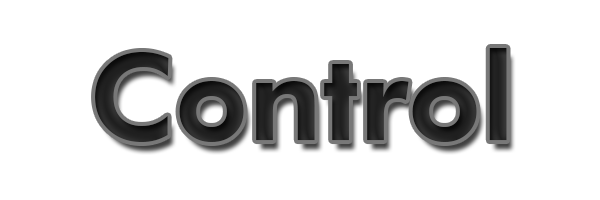
<style>
.page{position:relative;width:600px;height:200px;background:#ffffff}
.page>*{position:absolute;margin:0}
.t1{font:120px "FuturaBT-Heavy";color:#212121}
</style>
<div class="page">
<p class="t1" style="left:95px;top:48px;width:412px;height:94px">Control</p>
</div>
